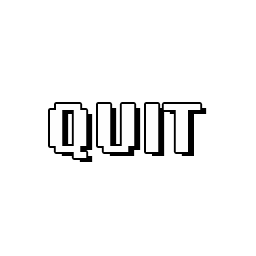
<style>
.page{position:relative;width:256px;height:256px;background:#ffffff}
.page>*{position:absolute;margin:0}
.t1{font:72px "LoRes12OT-Bold";color:#fefefe}
.t2{font:72px "LoRes12OT-Bold"}
</style>
<div class="page">
<p class="t1" style="left:50px;top:104px;width:151px;height:54px">QUIT</p>
<p class="t2" style="left:56px;top:108px;width:151px;height:54px">QUIT</p>
</div>
